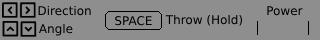
<style>
.page{position:relative;width:320px;height:40px;background:#8e8e8e}
.page>*{position:absolute;margin:0}
.t1{font:12px "DejaVuSans";color:#000000}
</style>
<div class="page">
<p class="t1" style="left:38px;top:5px;width:53px;height:11px">Direction</p>
<p class="t1" style="left:165px;top:14px;width:78px;height:12px">Throw (Hold)</p>
<p class="t1" style="left:38px;top:23px;width:35px;height:13px">Angle</p>
</div>
